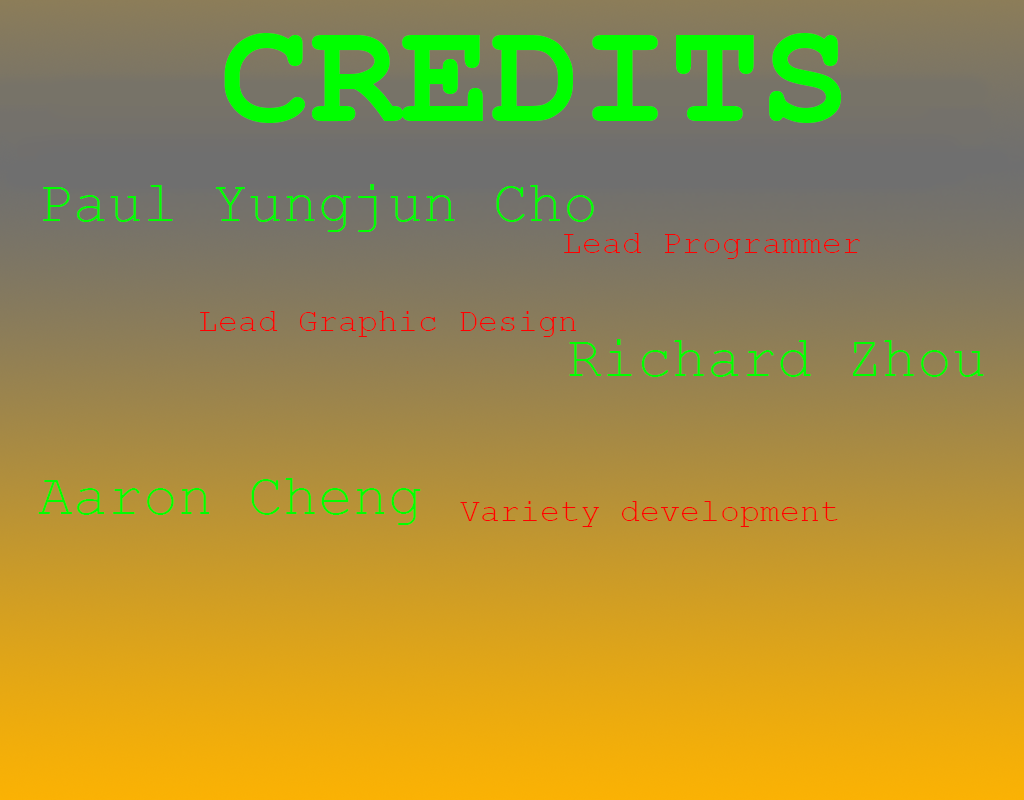
<style>
.page{position:relative;width:1024px;height:800px}
.page>*{position:absolute;margin:0}
.t1{font:150px "CourierNewPS-BoldMT";color:#00ff00}
.t2{font:58.3px "CourierNewPSMT";color:#00ff00}
.t3{font:33.3px "CourierNewPSMT";color:#ff0000}
</style>
<div class="page">
<p class="t1" style="left:224px;top:33px;width:618px;height:90px">CREDITS</p>
<p class="t2" style="left:43px;top:184px;width:551px;height:48px">Paul Yungjun Cho</p>
<p class="t3" style="left:564px;top:233px;width:296px;height:26px">Lead Programmer</p>
<p class="t3" style="left:200px;top:311px;width:376px;height:26px">Lead Graphic Design</p>
<p class="t2" style="left:569px;top:339px;width:415px;height:38px">Richard Zhou</p>
<p class="t2" style="left:38px;top:478px;width:383px;height:47px">Aaron Cheng</p>
<p class="t3" style="left:460px;top:501px;width:378px;height:26px">Variety development</p>
</div>
